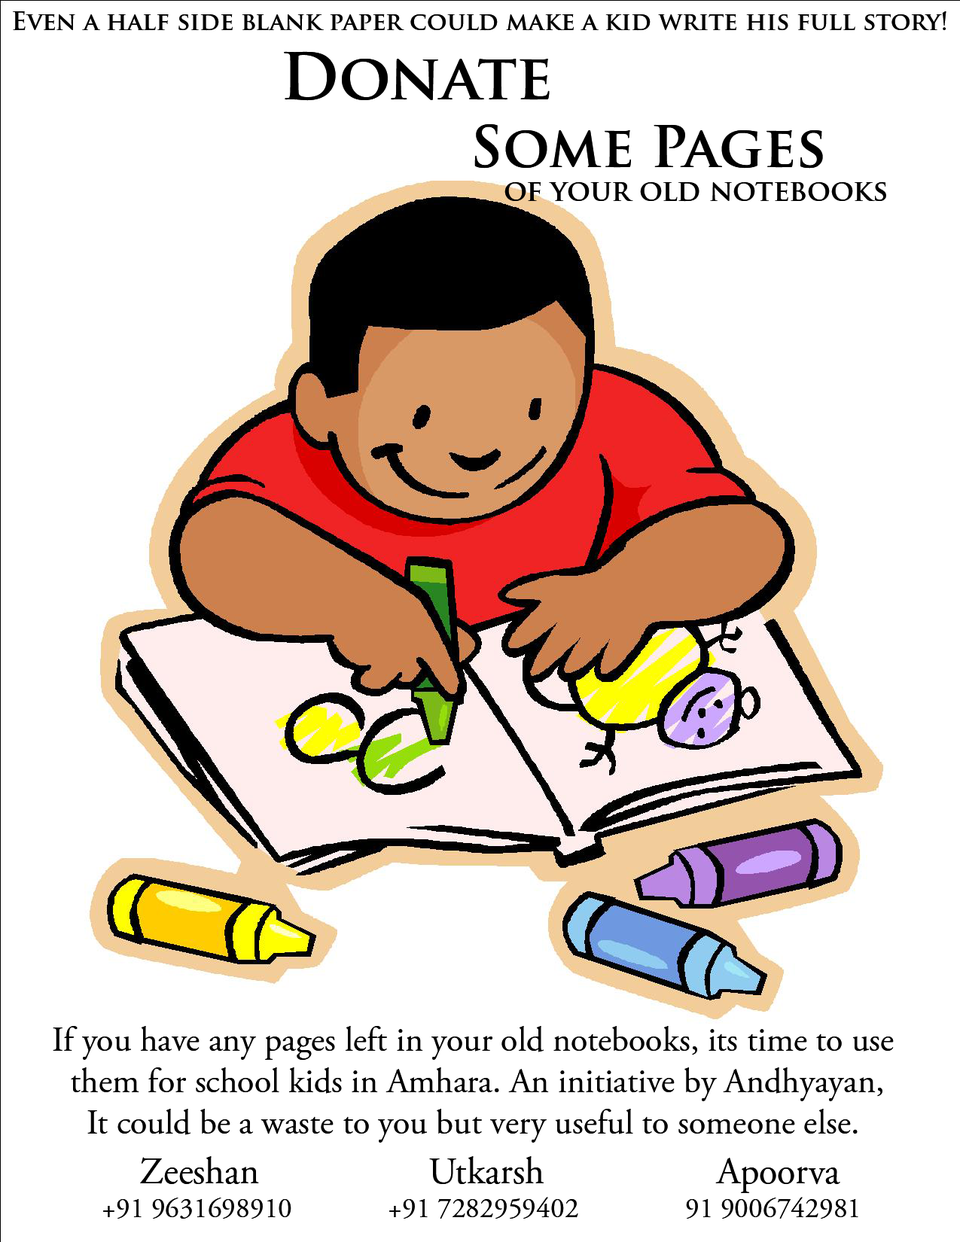
<style>
.page{position:relative;width:960px;height:1242px;background:#ffffff}
.page>*{position:absolute;margin:0}
.t1{font:24.3px "TrajanPro-Bold";color:#000000}
.t2{font:28.2px "TrajanPro-Bold";color:#000000}
.t3{font:62.7px "TrajanPro-Bold";color:#000000}
.t4{font:56.5px "TrajanPro-Bold";color:#000000}
.t5{font:34.5px "AGaramondPro-Regular";color:#000000}
.t6{font:28.2px "AGaramondPro-Regular";color:#000000}
.t7{font:37.6px "AGaramondPro-Regular";color:#000000}
</style>
<div class="page">
<p class="t1" style="left:13px;top:11px;width:933px;height:20px">Even a half side blank paper could make a kid write his full story!</p>
<p class="t2" style="left:284px;top:51px;width:602px;height:151px"><span class="t3">Donate</span><span class="t4"> <br>       Some Pages <br></span>           of your old notebooks</p>
<p class="t5" style="left:53px;top:1026px;width:841px;height:117px;text-align:center">If you have any pages left in your old notebooks, its time to use<br> them for school kids in Amhara. An initiative by Andhyayan,<br>It could be a waste to you but very useful to someone else.</p>
<p class="t6" style="left:103px;top:1156px;width:755px;height:63px"><span class="t7">    Zeeshan             Utkarsh        Apoorva<br></span>+91 9631698910        +91 7282959402      91 9006742981</p>
</div>
